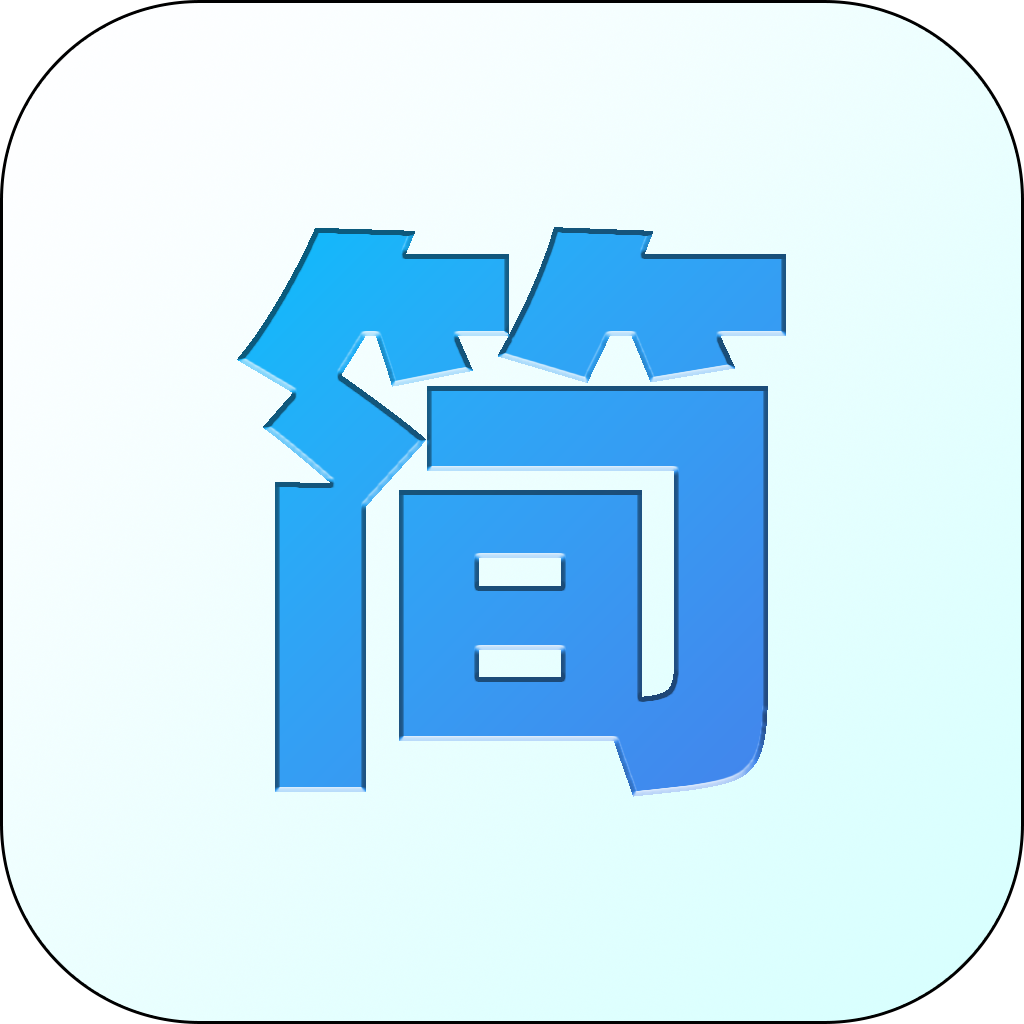
<style>
.page{position:relative;width:1024px;height:1024px}
.page>*{position:absolute;margin:0}
.t1{font:604.6px "AlibabaPuHuiTi_3_115_Black";color:#329ff3}
</style>
<div class="page">
<p class="t1" style="left:237px;top:227px;width:549px;height:570px">简</p>
</div>
